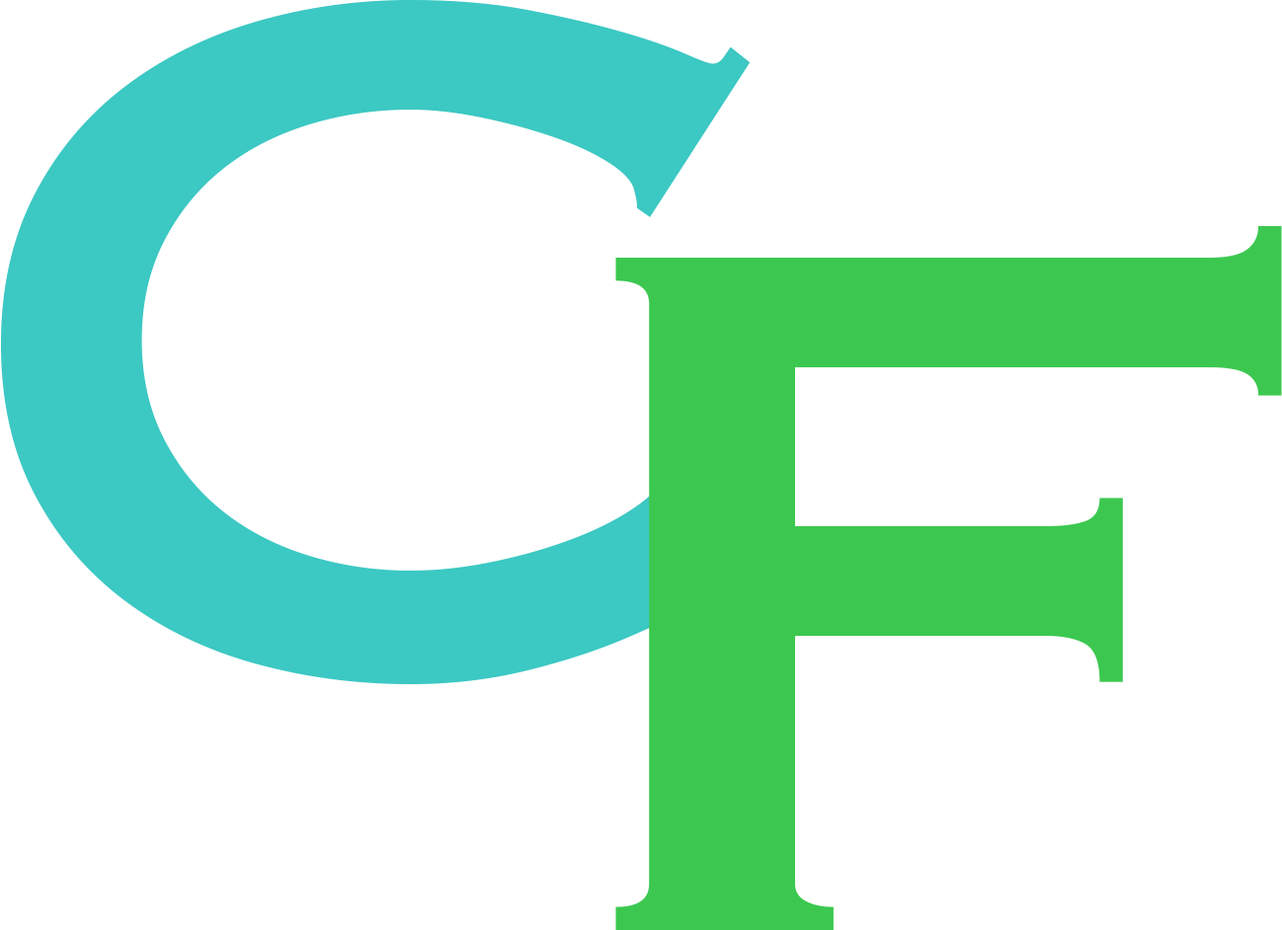
<style>
.page{position:relative;width:1282px;height:930px;background:#ffffff}
.page>*{position:absolute;margin:0}
.t1{font:1279.9px "Copperplate";letter-spacing:0.02em;color:#3cc8c3}
.t2{font:1279.9px "Copperplate";letter-spacing:0.02em;color:#3cc850}
</style>
<div class="page">
<p class="t1" style="left:0px;top:0px;width:763px;height:684px">C</p>
<p class="t2" style="left:615px;top:226px;width:667px;height:704px">F</p>
</div>
